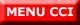
<style>
.page{position:relative;width:80px;height:25px;background:#ff0000}
.page>*{position:absolute;margin:0}
.t1{font:12px "Verdana-Bold";color:#ffffff}
</style>
<div class="page">
<p class="t1" style="left:7px;top:7px;width:66px;height:10px">MENU CCI</p>
</div>
